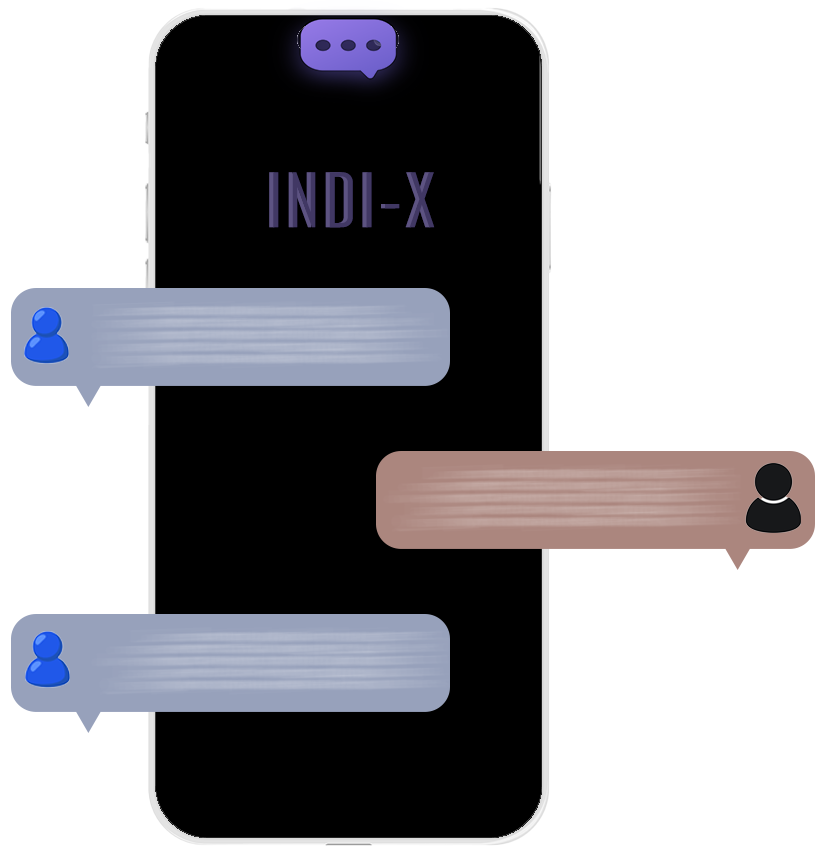
<style>
.page{position:relative;width:829px;height:851px;background:#ffffff}
.page>*{position:absolute;margin:0}
.t1{font:72px "AgencyFB-Reg";letter-spacing:0.075em;color:#5d5382}
.t2{font:72px "AgencyFB-Reg";letter-spacing:0.075em;color:#413864}
</style>
<div class="page">
<p class="t1" style="left:269px;top:172px;width:162px;height:56px">INDI-X</p>
<p class="t2" style="left:273px;top:172px;width:162px;height:56px">INDI-X</p>
</div>
